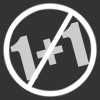
<style>
.page{position:relative;width:100px;height:100px;background:#333333}
.page>*{position:absolute;margin:0}
.t1{font:55px "Impact";letter-spacing:0.025em;color:#cccccc}
</style>
<div class="page">
<p class="t1" style="left:10px;top:21px;width:79px;height:60px;rotate:-15deg">1+1</p>
</div>
